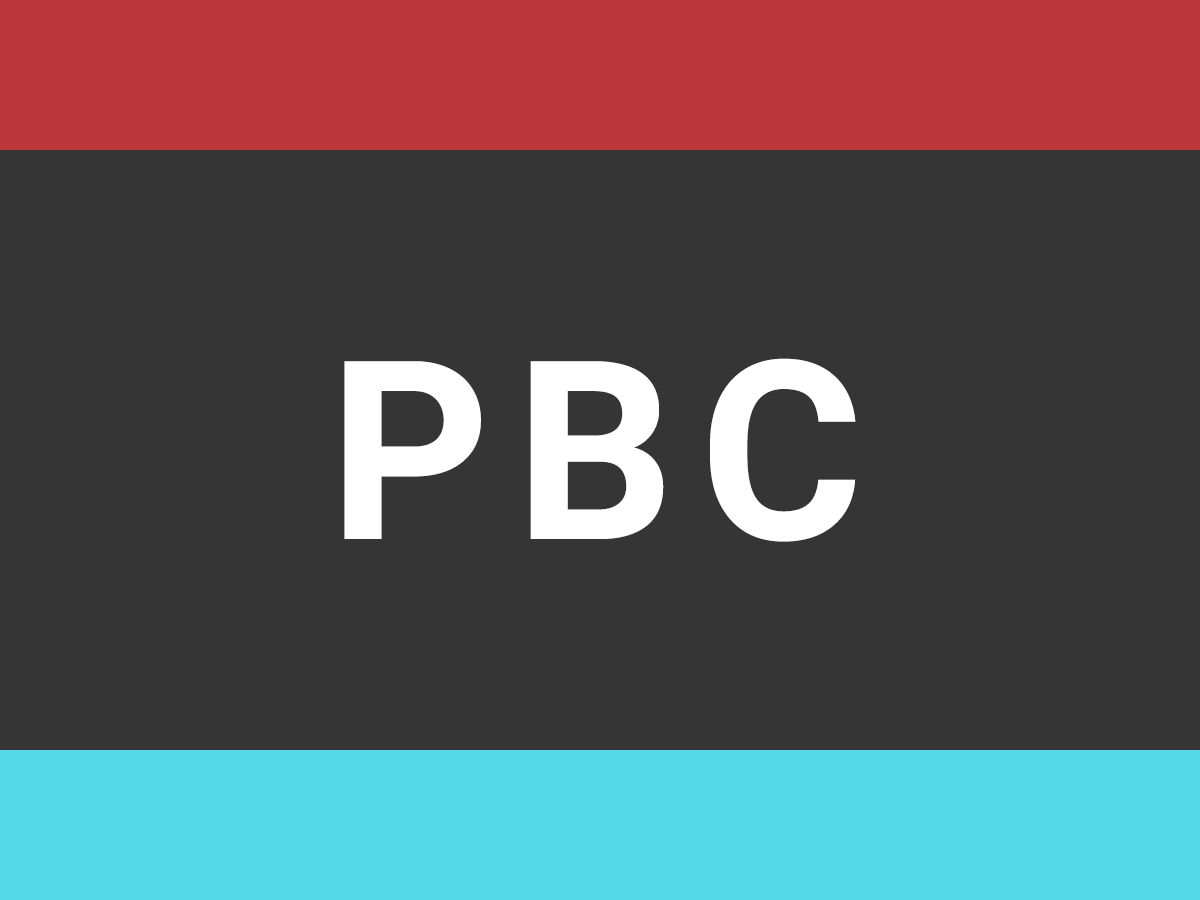
<style>
.page{position:relative;width:1200px;height:900px;background:#353535}
.page>*{position:absolute;margin:0}
.t1{font:250px "Roboto-Bold";letter-spacing:0.1em;color:#ffffff;text-transform:uppercase}
</style>
<div class="page">
<p class="t1" style="left:344px;top:358px;width:512px;height:184px">PBC</p>
</div>
